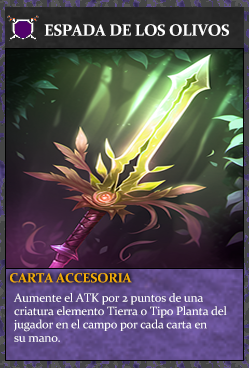
<style>
.page{position:relative;width:249px;height:368px}
.page>*{position:absolute;margin:0}
.t1{font:16px "Constantia-Bold";letter-spacing:-0.02em;color:#ffffff}
.t2{font:13.3px "Constantia-Bold";letter-spacing:-0.02em;color:#f2ac05}
.t3{font:12px/13.3px "Constantia";letter-spacing:-0.02em;color:#ffffff}
</style>
<div class="page">
<p class="t1" style="left:44px;top:24px;width:185px;height:12px">ESPADA DE LOS OLIVOS</p>
<p class="t2" style="left:10px;top:273px;width:122px;height:10px">CARTA ACCESORIA</p>
<p class="t3" style="left:13px;top:293px;width:214px;height:49px">Aumente el ATK por 2 puntos de una <br>criatura elemento Tierra o Tipo Planta del <br>jugador en el campo por cada carta en <br>su mano.</p>
</div>
